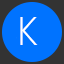
<style>
.page{position:relative;width:64px;height:64px;background:#0073ff}
.page>*{position:absolute;margin:0}
.t1{font:36px "MicrosoftJhengHeiLight";color:#ffffff}
</style>
<div class="page">
<p class="t1" style="left:20px;top:17px;width:18px;height:28px">K</p>
</div>
